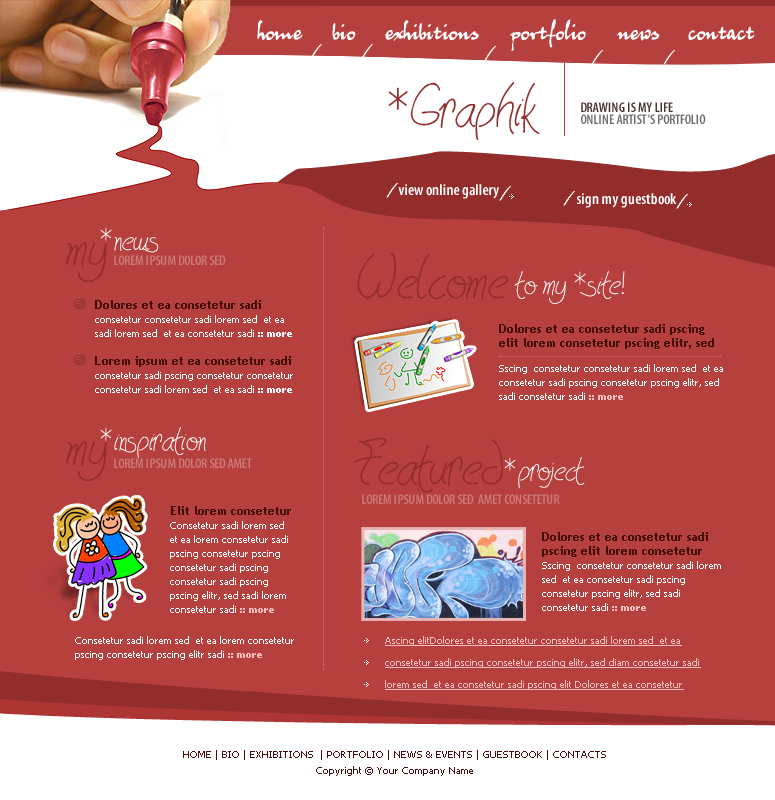
<style>
.page{position:relative;width:775px;height:800px;background:#b6403e}
.page>*{position:absolute;margin:0}
.t1{font:26px "Juergen";color:#ffffff}
.t2{font:55px "HavingWrit";color:#922d2b}
.t3{font:14px/12.2px "MyriadPro-SemiboldCond";color:#6c6c6c}
.t4{font:14px/12.2px "MyriadPro-SemiboldCond";color:#4b3232}
.t5{font:16px "MyriadPro-SemiboldCond";color:#ffffff}
.t6{font:32px "HavingWrit";color:#ffffff}
.t7{font:10px "Tahoma";color:#c56665}
.t8{font:14px "MyriadPro-SemiboldCond";color:#cc7a78}
.t9{font:10px/14px "Tahoma";color:#ffffff}
.t10{font:12px/14px "TrebuchetMS-Bold";color:#450c0c}
.t11{font:10px/14px "Tahoma-Bold";color:#ffffff}
.t12{font:10px/14px "Tahoma-Bold";color:#ffbebe}
.t13{font:10px/22px "Tahoma";color:#ffbebe;text-decoration:underline}
.t14{font:10px/16px "Tahoma";color:#450c0c}
</style>
<div class="page">
<p class="t1" style="left:257px;top:20px;width:46px;height:20px">home</p>
<p class="t1" style="left:332px;top:23px;width:24px;height:17px">bio</p>
<p class="t1" style="left:385px;top:20px;width:94px;height:21px">exhibitions</p>
<p class="t1" style="left:510px;top:19px;width:76px;height:32px">portfolio</p>
<p class="t1" style="left:617px;top:29px;width:43px;height:12px">news</p>
<p class="t1" style="left:688px;top:26px;width:67px;height:14px">contact</p>
<p class="t2" style="left:388px;top:82px;width:152px;height:59px">*Graphik</p>
<p class="t3" style="left:581px;top:102px;width:125px;height:22px"><span class="t4">DRAWING IS MY LIFE<br></span>ONLINE ARTIST’S PORTFOLIO</p>
<p class="t5" style="left:398px;top:184px;width:101px;height:15px">view online gallery</p>
<p class="t5" style="left:577px;top:193px;width:100px;height:15px">sign my guestbook</p>
<p class="t6" style="left:100px;top:227px;width:59px;height:26px">*news</p>
<p class="t7" style="left:323px;top:227px;width:1px;height:443px;rotate:90deg">---------------------------------------------------------------------------------------------------------------</p>
<p class="t2" style="left:66px;top:242px;width:41px;height:41px">my</p>
<p class="t8" style="left:114px;top:255px;width:112px;height:10px">LOREM IPSUM DOLOR SED</p>
<p class="t2" style="left:357px;top:252px;width:152px;height:49px">Welcome</p>
<p class="t6" style="left:514px;top:271px;width:111px;height:33px">to my *site!</p>
<p class="t9" style="left:95px;top:300px;width:198px;height:93px"><span class="t10">Dolores et ea consetetur sadi <br></span>consetetur consetetur sadi lorem sed  et ea  sadi lorem sed  et ea consetetur sadi <span class="t11">:: more<br><br></span><span class="t10">Lorem ipsum et ea consetetur sadi <br></span>consetetur sadi pscing consetetur consetetur consetetur sadi lorem sed  et ea sadi <span class="t11">:: more</span></p>
<p class="t10" style="left:499px;top:324px;width:215px;height:25px">Dolores et ea consetetur sadi pscing elit lorem consetetur pscing elitr, sed</p>
<p class="t7" style="left:499px;top:356px;width:223px;height:1px">--------------------------------------------------------</p>
<p class="t9" style="left:499px;top:364px;width:224px;height:36px">Sscing  consetetur consetetur sadi lorem sed  et ea consetetur sadi pscing consetetur pscing elitr, sed sadi consetetur sadi <span class="t12">:: more</span></p>
<p class="t6" style="left:100px;top:427px;width:106px;height:32px">*inspiration</p>
<p class="t2" style="left:354px;top:437px;width:149px;height:56px">Featured</p>
<p class="t2" style="left:66px;top:441px;width:41px;height:41px">my</p>
<p class="t8" style="left:114px;top:458px;width:138px;height:10px">LOREM IPSUM DOLOR SED AMET</p>
<p class="t6" style="left:504px;top:457px;width:81px;height:32px">*project</p>
<p class="t8" style="left:362px;top:494px;width:198px;height:10px">LOREM IPSUM DOLOR SED  AMET CONSETETUR</p>
<p class="t9" style="left:170px;top:506px;width:121px;height:107px"><span class="t10">Elit lorem consetetur<br></span>Consetetur sadi lorem sed  <br>et ea lorem consetetur sadi pscing consetetur pscing consetetur sadi pscing consetetur sadi pscing pscing elitr, sed sadi lorem consetetur sadi <span class="t12">:: more</span></p>
<p class="t9" style="left:542px;top:532px;width:179px;height:79px"><span class="t10">Dolores et ea consetetur sadi pscing elit lorem consetetur<br></span>Sscing  consetetur consetetur sadi lorem sed  et ea consetetur sadi pscing consetetur pscing elitr, sed sadi consetetur sadi <span class="t12">:: more</span></p>
<p class="t9" style="left:75px;top:636px;width:219px;height:24px">Consetetur sadi lorem sed  et ea lorem consetetur pscing consetetur pscing elitr sadi <span class="t12">:: more</span></p>
<p class="t13" style="left:385px;top:636px;width:316px;height:54px">Ascing elitDolores et ea consetetur consetetur sadi lorem sed  et ea consetetur sadi pscing consetetur pscing elitr, sed diam consetetur sadi lorem sed  et ea consetetur sadi pscing elit Dolores et ea consetetur</p>
<p class="t14" style="left:183px;top:750px;width:423px;height:26px;text-align:center">HOME | BIO | EXHIBITIONS  | PORTFOLIO | NEWS &amp; EVENTS | GUESTBOOK | CONTACTS<br>Copyright © Your Company Name</p>
</div>
